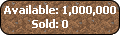
<style>
.page{position:relative;width:120px;height:35px}
.page>*{position:absolute;margin:0}
.t1{font:11px "Tahoma-Bold";color:#ffffff}
</style>
<div class="page">
<p class="t1" style="left:4px;top:5px;width:112px;height:11px">Available: 1,000,000</p>
<p class="t1" style="left:32px;top:19px;width:36px;height:9px">Sold: 0</p>
</div>
